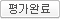
<style>
.page{position:relative;width:60px;height:19px}
.page>*{position:absolute;margin:0}
.t1{font:12px "morris9";color:#4f4f4f}
</style>
<div class="page">
<p class="t1" style="left:9px;top:4px;width:41px;height:10px">평가완료</p>
</div>
